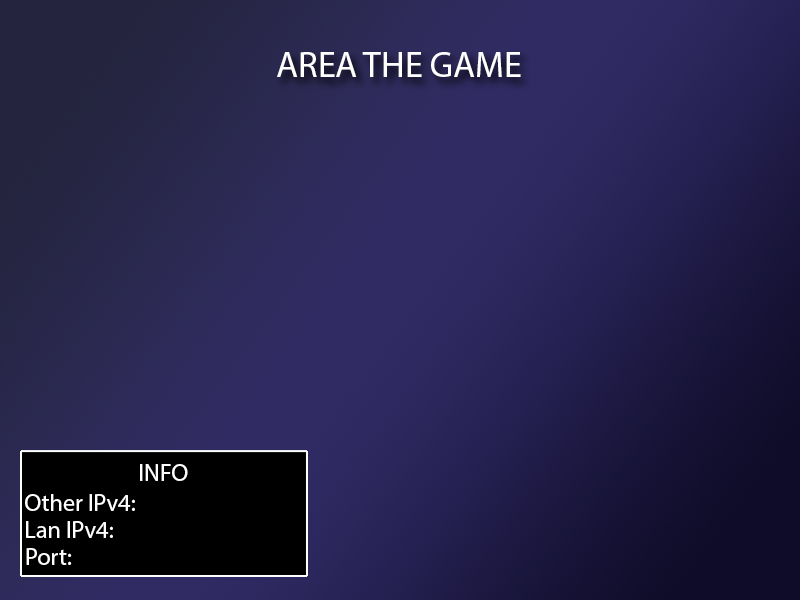
<style>
.page{position:relative;width:800px;height:600px}
.page>*{position:absolute;margin:0}
.t1{font:36px "MyriadPro-Regular";color:#ffffff}
.t2{font:24px "MyriadPro-Regular";color:#ffffff}
</style>
<div class="page">
<p class="t1" style="left:277px;top:52px;width:244px;height:25px">AREA THE GAME</p>
<p class="t2" style="left:140px;top:464px;width:48px;height:17px">INFO</p>
<p class="t2" style="left:25px;top:494px;width:110px;height:17px">Other IPv4:</p>
<p class="t2" style="left:26px;top:521px;width:87px;height:17px">Lan IPv4:</p>
<p class="t2" style="left:26px;top:548px;width:46px;height:17px">Port:</p>
</div>
